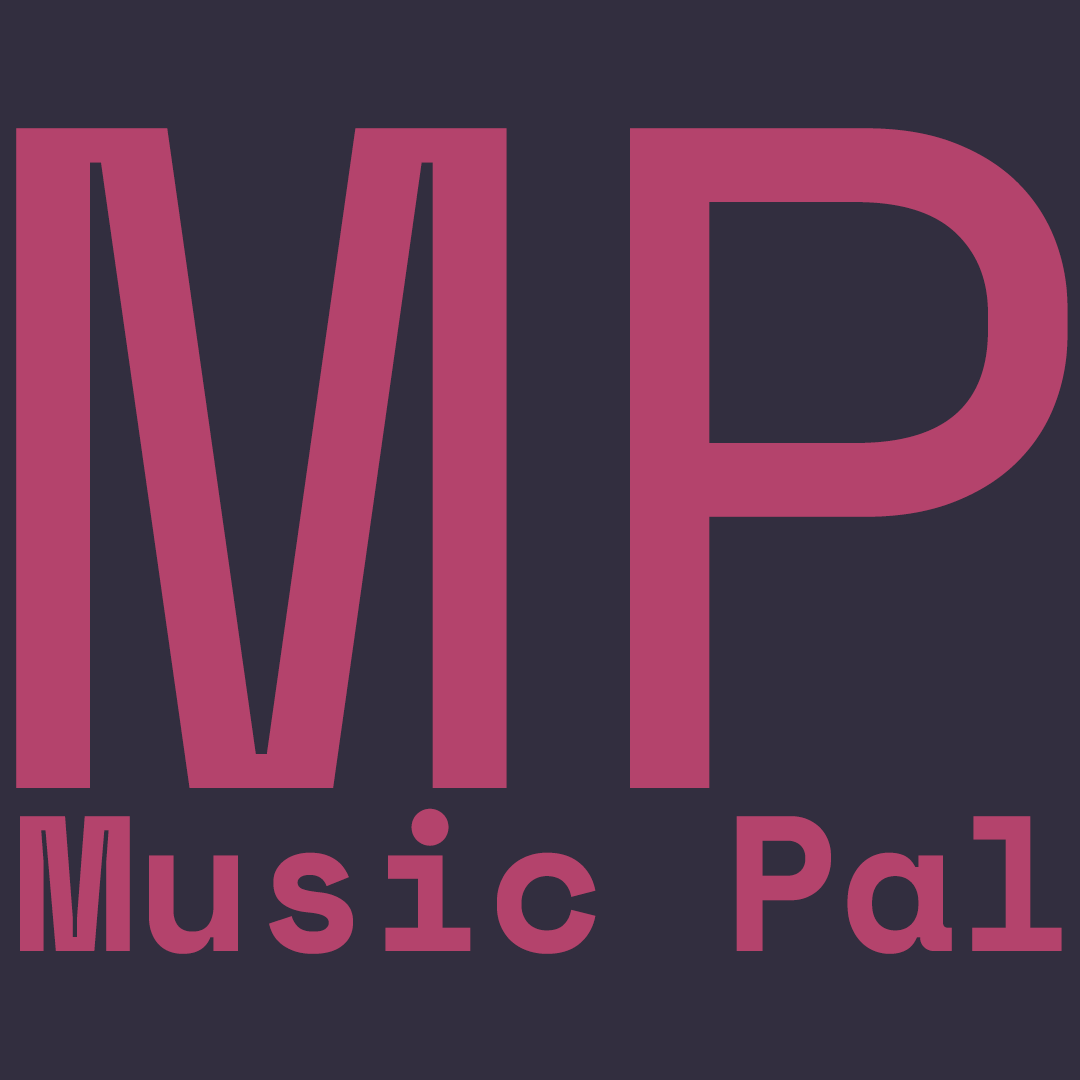
<style>
.page{position:relative;width:1080px;height:1080px;background:#322e3f}
.page>*{position:absolute;margin:0}
.t1{font:942.4px "SpaceMono-Regular";color:#b4436c}
.t2{font:192.5px "SpaceMono-Bold";color:#b4436c}
</style>
<div class="page">
<p class="t1" style="left:16px;top:128px;width:1052px;height:660px">MP</p>
<p class="t2" style="left:20px;top:808px;width:1042px;height:146px">Music Pal</p>
</div>
